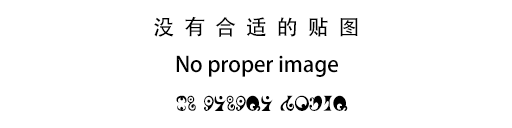
<style>
.page{position:relative;width:512px;height:128px;background:#ffffff}
.page>*{position:absolute;margin:0}
.t1{font:21.3px "AdobeHeitiStd-Regular";color:#000000}
.t2{font:21.3px "MadokaRunes";color:#000000}
</style>
<div class="page">
<p class="t1" style="left:154px;top:16px;width:204px;height:21px">没  有  合  适  的  贴  图</p>
<p class="t1" style="left:176px;top:55px;width:162px;height:22px">No proper image</p>
<p class="t2" style="left:176px;top:95px;width:172px;height:16px">No proper image</p>
</div>
